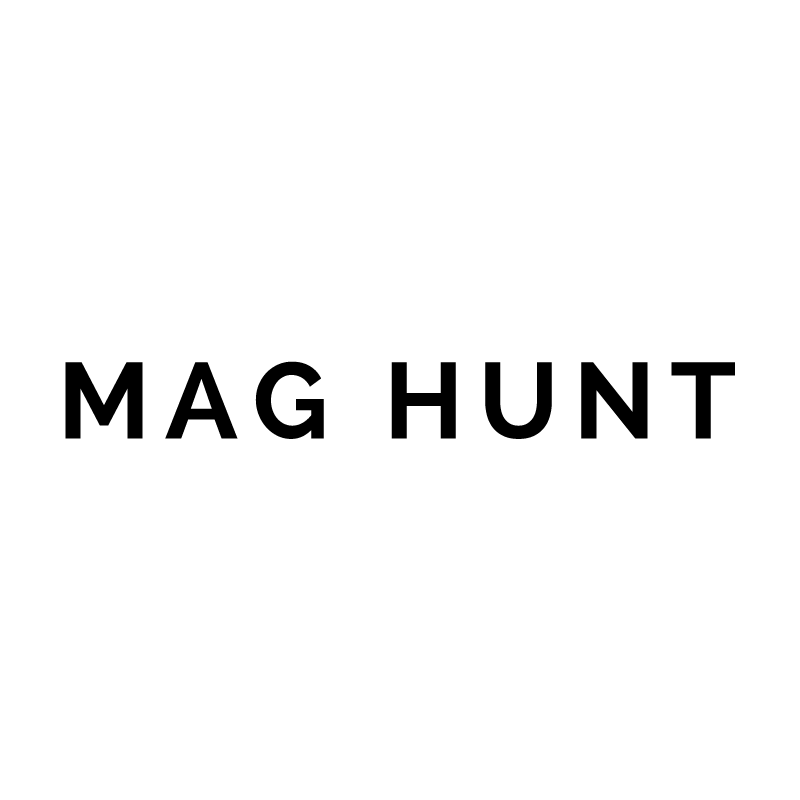
<style>
.page{position:relative;width:800px;height:800px;background:#ffffff}
.page>*{position:absolute;margin:0}
.t1{font:107px "Raleway-Bold";letter-spacing:0.14em;color:#000000}
</style>
<div class="page">
<p class="t1" style="left:65px;top:361px;width:670px;height:78px">MAG HUNT</p>
</div>
